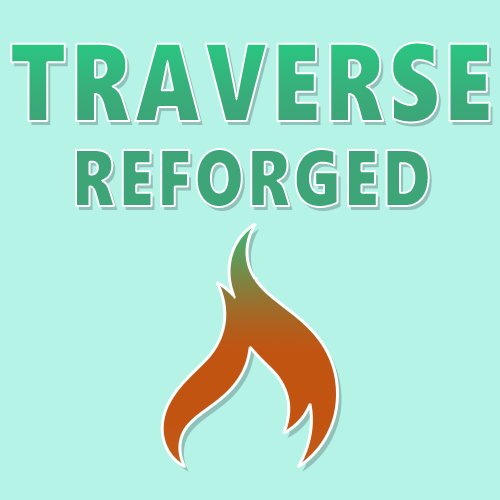
<style>
.page{position:relative;width:500px;height:500px;background:#b5f3e7}
.page>*{position:absolute;margin:0}
.t1{font:110px/85px "SegoeUIBlack";letter-spacing:0.05em;color:#3cae7a;scale:0.8 1}
.t2{font:80px/85px "SegoeUIBlack";letter-spacing:0.05em;color:#3cae7a;scale:0.8 1}
</style>
<div class="page">
<p class="t1" style="left:11px;top:42px;width:479px;height:165px;text-align:center">TRAVERSE<br><span class="t2">REFORGED</span></p>
</div>
